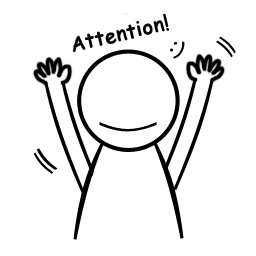
<style>
.page{position:relative;width:256px;height:256px;background:#ffffff}
.page>*{position:absolute;margin:0}
.t1{font:20px "ComicSansMS";color:#000000;font-weight:bold}
.t2{font:20px "Gulim";color:#000000;font-weight:bold}
</style>
<div class="page">
<p class="t1" style="left:72px;top:13px;width:98px;height:40px;rotate:-13deg">Attention!</p>
<p class="t2" style="left:170px;top:41px;width:15px;height:18px;rotate:30deg">:)</p>
</div>
